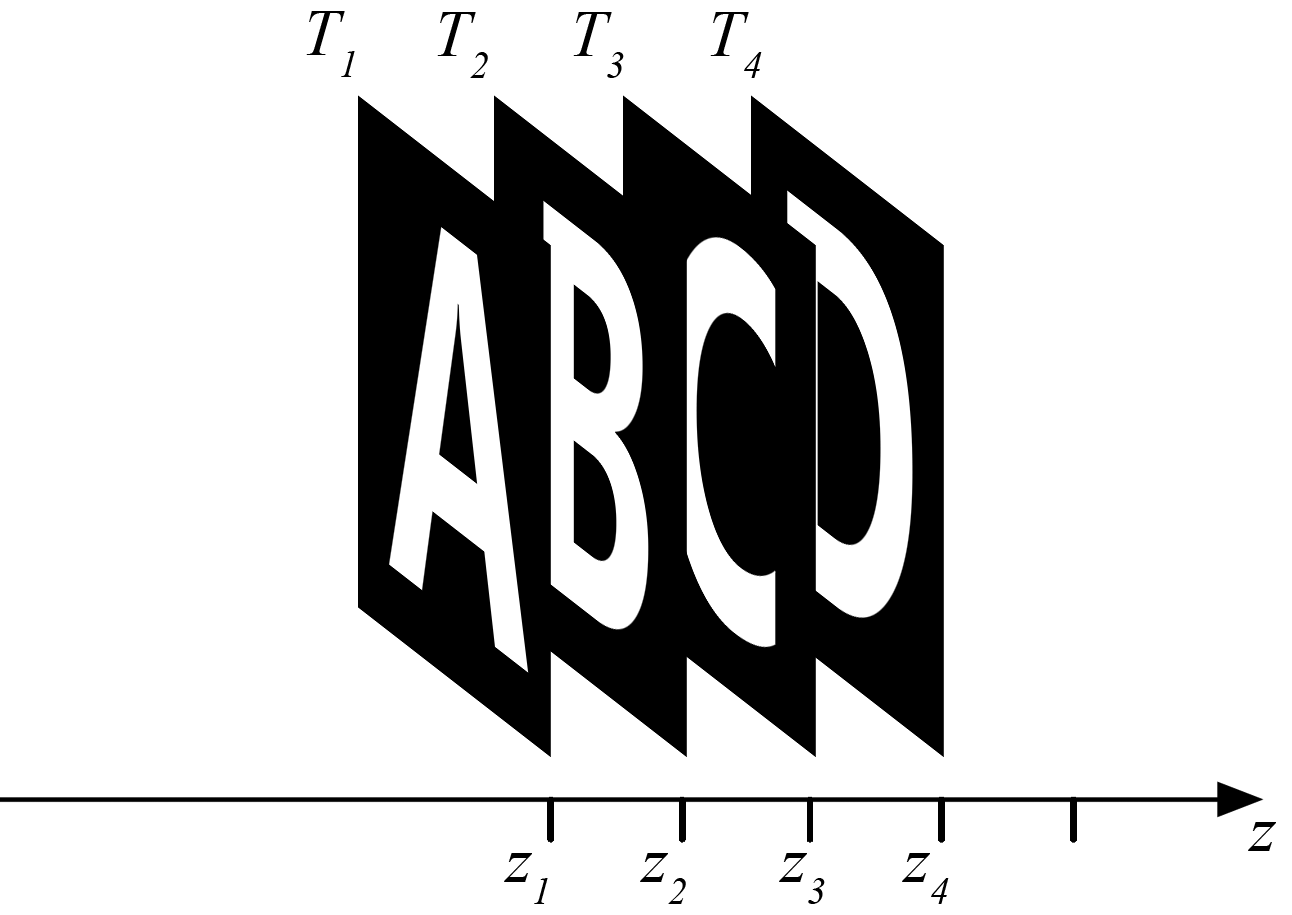
<style>
.page{position:relative;width:1292px;height:915px;background:#ffffff}
.page>*{position:absolute;margin:0}
.t1{font:66px "TimesNewRomanPS-ItalicMT";color:#000000}
</style>
<div class="page">
<p class="t1" style="left:306px;top:11px;width:49px;height:66px">T1</p>
<p class="t1" style="left:437px;top:12px;width:51px;height:66px">T2</p>
<p class="t1" style="left:573px;top:12px;width:51px;height:66px">T3</p>
<p class="t1" style="left:710px;top:12px;width:52px;height:66px">T4</p>
<p class="t1" style="left:1248px;top:822px;width:28px;height:29px">z</p>
<p class="t1" style="left:504px;top:853px;width:44px;height:51px">z1</p>
<p class="t1" style="left:640px;top:853px;width:46px;height:51px">z2</p>
<p class="t1" style="left:779px;top:853px;width:46px;height:51px">z3</p>
<p class="t1" style="left:902px;top:853px;width:47px;height:51px">z4</p>
</div>
